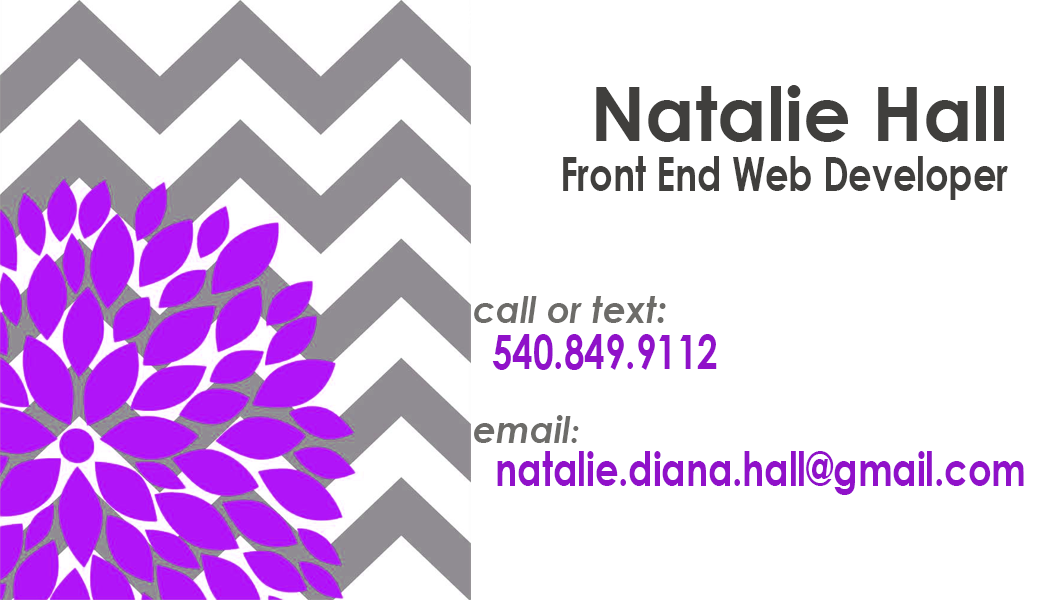
<style>
.page{position:relative;width:1050px;height:600px;background:#ffffff}
.page>*{position:absolute;margin:0}
.t1{font:46.7px/50px "CenturyGothic-Bold";color:#403f3d;scale:0.79 1}
.t2{font:75px/66.7px "CenturyGothic-Bold";color:#403f3d}
.t3{font:37.3px "CenturyGothic-BoldItalic";color:#6d6c69;scale:0.97 1}
.t4{font:46.7px/116.7px "CenturyGothic-Bold";color:#9011c9;scale:0.79 1}
.t5{font:46.7px/50px "CenturyGothic-Bold";color:#e5c215;scale:0.79 1}
.t6{font:46.7px/50px "CenturyGothic-Bold";color:#9011c9;scale:0.79 1}
.t7{font:7.7px "CenturyGothic-BoldItalic";color:#6d6c69;scale:0.97 1}
</style>
<div class="page">
<p class="t1" style="left:563px;top:85px;width:445px;height:115px;text-align:right"><span class="t2">Natalie Hall<br></span>Front End Web Developer</p>
<p class="t3" style="left:474px;top:296px;width:192px;height:27px">call or text:</p>
<p class="t4" style="left:492px;top:334px;width:532px;height:161px"><span class="t5">  </span><span class="t6">540.849.9112<br></span>natalie.diana.hall@gmail.com</p>
<p class="t3" style="left:474px;top:415px;width:105px;height:28px">email<span class="t7">:</span></p>
</div>
